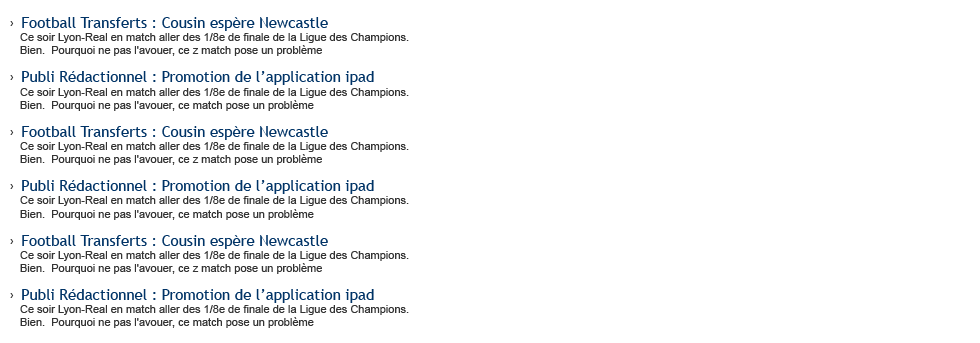
<style>
.page{position:relative;width:980px;height:343px;background:#ffffff}
.page>*{position:absolute;margin:0}
.t1{font:11px "ArialMT";color:#333333}
.t2{font:12px "ArialMT";color:#333333}
.t3{font:15px "TrebuchetMS";color:#003366}
</style>
<div class="page">
<p class="t1" style="left:10px;top:17px;width:399px;height:311px"><span class="t2">›  </span><span class="t3">Football Transferts : Cousin espère Newcastle<br></span>Ce soir Lyon-Real en match aller des 1/8e de finale de la Ligue des Champions. Bien.  Pourquoi ne pas l'avouer, ce z match pose un problème  <br><span class="t2">›  </span><span class="t3">Publi Rédactionnel : Promotion de l’application ipad<br></span>Ce soir Lyon-Real en match aller des 1/8e de finale de la Ligue des Champions. Bien.  Pourquoi ne pas l'avouer, ce match pose un problème  <br><span class="t2">›  </span><span class="t3">Football Transferts : Cousin espère Newcastle<br></span>Ce soir Lyon-Real en match aller des 1/8e de finale de la Ligue des Champions. Bien.  Pourquoi ne pas l'avouer, ce z match pose un problème  <br><span class="t2">›  </span><span class="t3">Publi Rédactionnel : Promotion de l’application ipad<br></span>Ce soir Lyon-Real en match aller des 1/8e de finale de la Ligue des Champions. Bien.  Pourquoi ne pas l'avouer, ce match pose un problème  <br><span class="t2">›  </span><span class="t3">Football Transferts : Cousin espère Newcastle<br></span>Ce soir Lyon-Real en match aller des 1/8e de finale de la Ligue des Champions. Bien.  Pourquoi ne pas l'avouer, ce z match pose un problème  <br><span class="t2">›  </span><span class="t3">Publi Rédactionnel : Promotion de l’application ipad<br></span>Ce soir Lyon-Real en match aller des 1/8e de finale de la Ligue des Champions. Bien.  Pourquoi ne pas l'avouer, ce match pose un problème</p>
</div>
